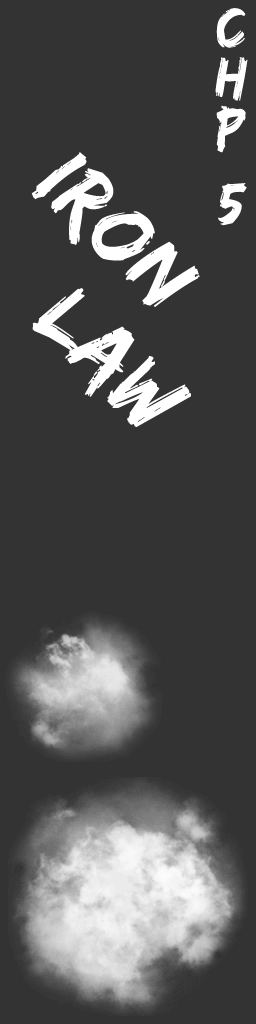
<style>
.page{position:relative;width:256px;height:1024px;background:#333333}
.page>*{position:absolute;margin:0}
.t1{font:60px/25.1px "EdoSZ";letter-spacing:0.03em;color:#ffffff}
.t2{font:91.3px "EdoSZ";letter-spacing:0.03em;color:#ffffff;scale:0.96 1}
</style>
<div class="page">
<p class="t1" style="left:215px;top:8px;width:33px;height:218px;text-align:center">C<br><br>H<br><br>P<br><br><br>5</p>
<p class="t2" style="left:31px;top:152px;width:169px;height:155px;rotate:45deg">Iron</p>
<p class="t2" style="left:32px;top:288px;width:159px;height:139px;rotate:45deg">Law</p>
</div>
